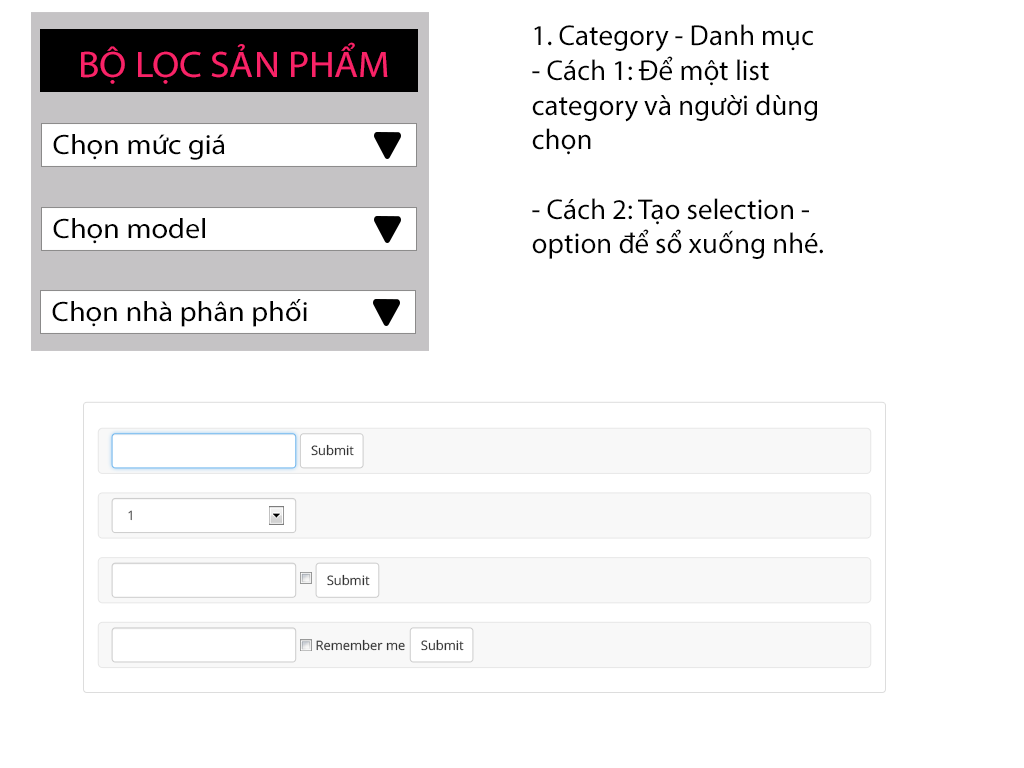
<style>
.page{position:relative;width:1024px;height:768px;background:#ffffff}
.page>*{position:absolute;margin:0}
.t1{font:28.9px "MyriadPro-Regular";color:#000000}
.t2{font:37px "MyriadPro-Regular";color:#f82367;scale:1.06 1}
.t3{font:28.3px "MyriadPro-Regular";color:#000000;scale:1.06 1}
.t4{font:12.9px "OpenSans";color:#333333}
.t5{font:12.9px "OpenSans"}
</style>
<div class="page">
<p class="t1" style="left:532px;top:24px;width:291px;height:235px">1. Category - Danh mục<br>- Cách 1: Để một list <br>category và người dùng<br>chọn<br><br>- Cách 2: Tạo selection -<br>option để sổ xuống nhé.</p>
<p class="t2" style="left:81px;top:42px;width:307px;height:42px">BỘ LỌC SẢN PHẨM</p>
<p class="t3" style="left:53px;top:134px;width:172px;height:26px">Chọn mức giá</p>
<p class="t3" style="left:53px;top:218px;width:152px;height:26px">Chọn model</p>
<p class="t3" style="left:52px;top:299px;width:255px;height:28px">Chọn nhà phân phối</p>
<p class="t4" style="left:311px;top:444px;width:43px;height:12px">Submit</p>
<p class="t5" style="left:128px;top:510px;width:4px;height:11px">1</p>
<p class="t4" style="left:327px;top:574px;width:43px;height:12px">Submit</p>
<p class="t4" style="left:316px;top:639px;width:89px;height:12px">Remember me</p>
<p class="t4" style="left:421px;top:639px;width:43px;height:12px">Submit</p>
</div>
